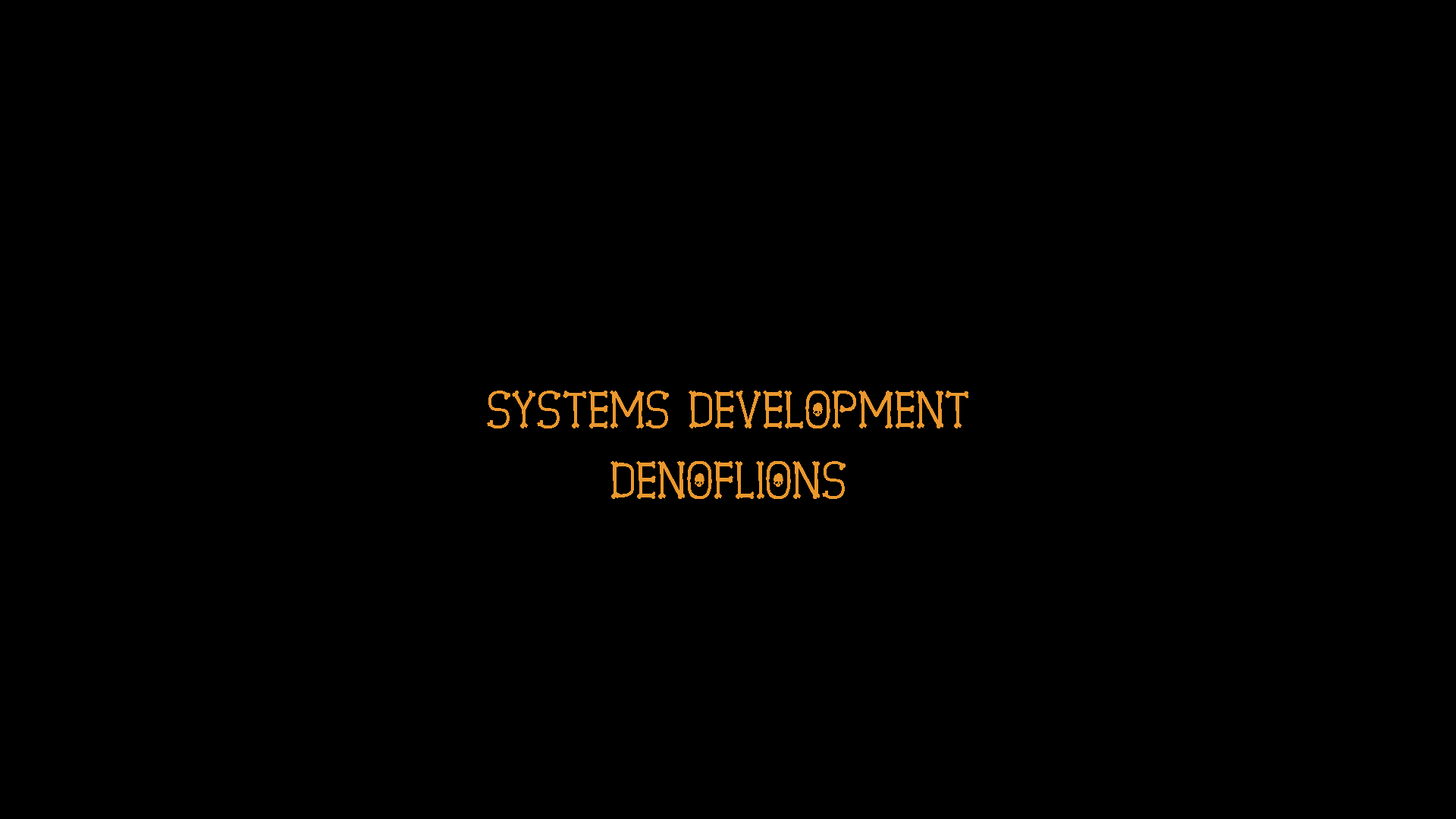
<style>
.page{position:relative;width:1456px;height:819px;background:#000000}
.page>*{position:absolute;margin:0}
.t1{font:45.5px "SpookySkeleton";color:#eb982d}
</style>
<div class="page">
<p class="t1" style="left:487px;top:391px;width:481px;height:37px">Systems development</p>
<p class="t1" style="left:610px;top:461px;width:236px;height:38px">denoflions</p>
</div>
